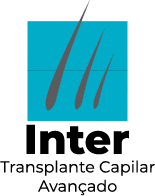
<style>
.page{position:relative;width:155px;height:196px;background:#ffffff}
.page>*{position:absolute;margin:0}
.t1{font:41.5px "Montserrat-ExtraBold";color:#000000}
.t2{font:16px "Montserrat-Regular";color:#000000}
</style>
<div class="page">
<p class="t1" style="left:26px;top:124px;width:103px;height:31px">Inter</p>
<p class="t2" style="left:0px;top:160px;width:155px;height:36px;text-align:center">Transplante Capilar <br>Avançado</p>
</div>
